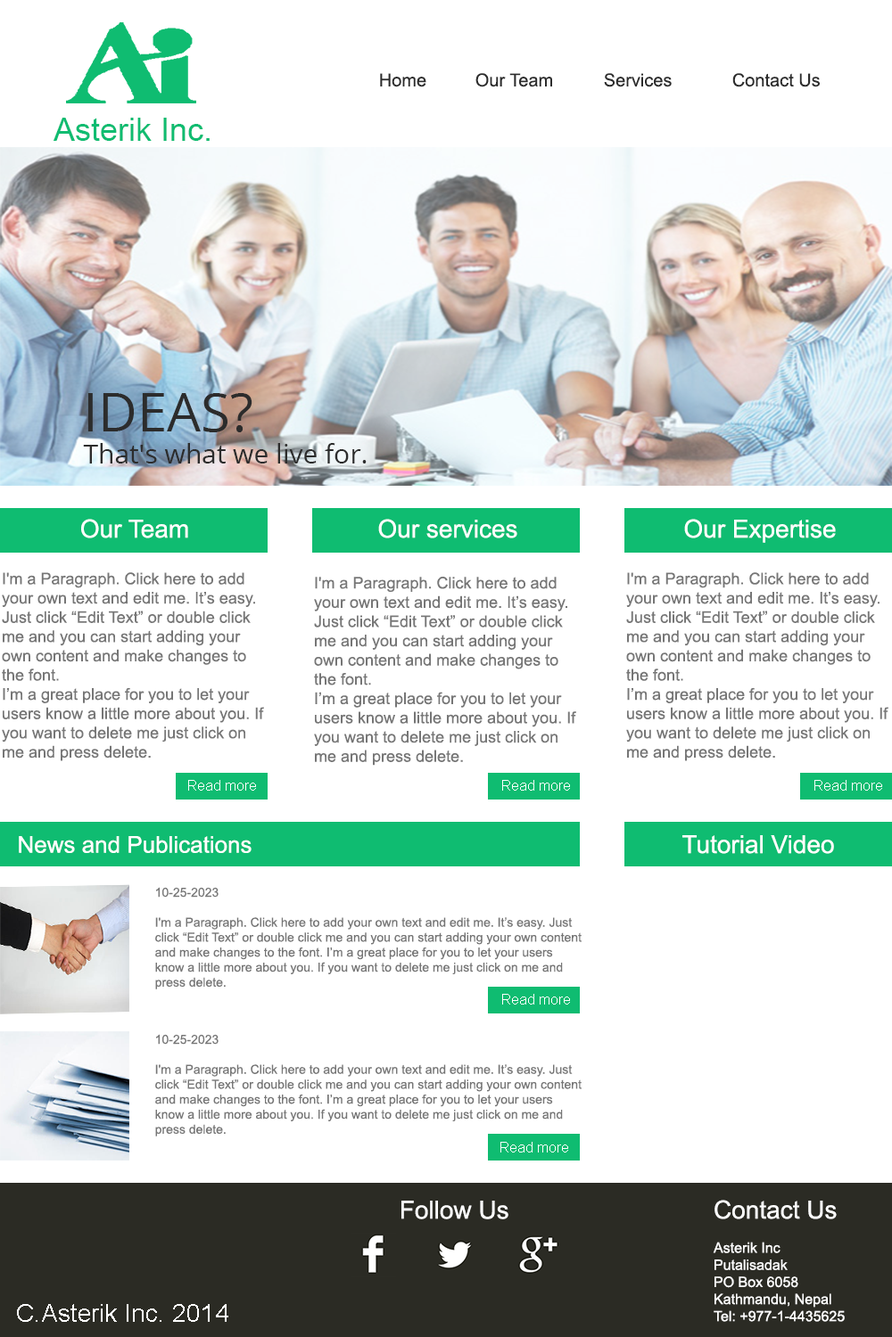
<style>
.page{position:relative;width:892px;height:1337px;background:#ffffff}
.page>*{position:absolute;margin:0}
.t1{font:17.8px "ArialMT";color:#2c2c2c}
.t2{font:32.1px "ArialMT";color:#0fbc71}
.t3{font:26.7px/32.1px "OpenSans";color:#2c2c2c}
.t4{font:53.5px/32.1px "OpenSans";color:#2c2c2c}
.t5{font:25px "ArialMT";color:#ffffff}
.t6{font:16px "ArialMT";color:#767676}
.t7{font:14.3px "ArialMT";color:#ffffff}
.t8{font:23.2px "ArialMT";color:#ffffff}
.t9{font:12.5px "ArialMT";color:#767676}
</style>
<div class="page">
<p class="t1" style="left:380px;top:73px;width:439px;height:14px">Home  Our Team  Services  Contact Us</p>
<p class="t2" style="left:53px;top:118px;width:157px;height:23px">Asterik Inc.</p>
<p class="t3" style="left:83px;top:393px;width:283px;height:71px"><span class="t4">IDEAS?<br></span>That's what we live for.</p>
<p class="t5" style="left:81px;top:519px;width:107px;height:20px">Our Team</p>
<p class="t5" style="left:378px;top:519px;width:139px;height:20px">Our services</p>
<p class="t5" style="left:684px;top:519px;width:151px;height:24px">Our Expertise</p>
<p class="t6" style="left:2px;top:572px;width:262px;height:189px">I'm a Paragraph. Click here to add your own text and edit me. It’s easy. Just click “Edit Text” or double click me and you can start adding your own content and make changes to the font.<br>I’m a great place for you to let your users know a little more about you. If you want to delete me just click on me and press delete.</p>
<p class="t6" style="left:314px;top:577px;width:262px;height:189px">I'm a Paragraph. Click here to add your own text and edit me. It’s easy. Just click “Edit Text” or double click me and you can start adding your own content and make changes to the font.​<br>I’m a great place for you to let your users know a little more about you. If you want to delete me just click on me and press delete.</p>
<p class="t6" style="left:626px;top:572px;width:262px;height:189px">I'm a Paragraph. Click here to add your own text and edit me. It’s easy. Just click “Edit Text” or double click me and you can start adding your own content and make changes to the font.​<br>I’m a great place for you to let your users know a little more about you. If you want to delete me just click on me and press delete.</p>
<p class="t7" style="left:188px;top:780px;width:68px;height:11px">Read more</p>
<p class="t7" style="left:502px;top:780px;width:68px;height:11px">Read more</p>
<p class="t7" style="left:814px;top:780px;width:68px;height:11px">Read more</p>
<p class="t8" style="left:19px;top:836px;width:232px;height:17px">News and Publications</p>
<p class="t5" style="left:682px;top:835px;width:152px;height:19px">Tutorial Video</p>
<p class="t9" style="left:155px;top:887px;width:426px;height:103px">10-25-2023<br><br>I'm a Paragraph. Click here to add your own text and edit me. It’s easy. Just click “Edit Text” or double click me and you can start adding your own content and make changes to the font. I’m a great place for you to let your users know a little more about you. If you want to delete me just click on me and press delete.</p>
<p class="t7" style="left:502px;top:994px;width:68px;height:11px">Read more</p>
<p class="t9" style="left:155px;top:1034px;width:426px;height:103px">10-25-2023<br><br>I'm a Paragraph. Click here to add your own text and edit me. It’s easy. Just click “Edit Text” or double click me and you can start adding your own content and make changes to the font. I’m a great place for you to let your users know a little more about you. If you want to delete me just click on me and press delete.</p>
<p class="t7" style="left:500px;top:1142px;width:68px;height:11px">Read more</p>
<p class="t5" style="left:401px;top:1201px;width:107px;height:19px">Follow Us</p>
<p class="t7" style="left:712px;top:1200px;width:132px;height:122px"><span class="t5">Contact Us<br></span><br>Asterik Inc<br>Putalisadak<br>PO Box 6058<br>Kathmandu, Nepal<br>Tel: +977-1-4435625</p>
<p class="t5" style="left:17px;top:1304px;width:211px;height:18px">C.Asterik Inc. 2014</p>
</div>
